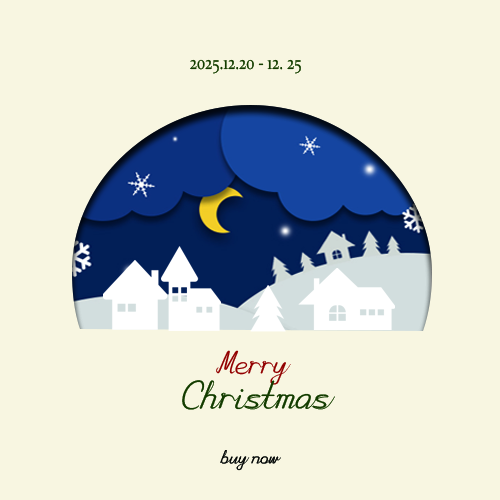
<style>
.page{position:relative;width:500px;height:500px;background:#f8f6e1}
.page>*{position:absolute;margin:0}
.t1{font:19.6px "Constantia";color:#133b00;scale:0.77 1}
.t2{font:37.3px/35.8px "Continuous";color:#143b00}
.t3{font:30px/35.8px "Continuous";color:#930000}
.t4{font:18px "Continuous";color:#040606}
</style>
<div class="page">
<p class="t1" style="left:190px;top:59px;width:111px;height:15px">2025.12.20 - 12. 25</p>
<p class="t2" style="left:182px;top:350px;width:153px;height:60px;text-align:center"><span class="t3">Merry <br></span>Christmas</p>
<p class="t4" style="left:220px;top:450px;width:61px;height:21px">buy now</p>
</div>
